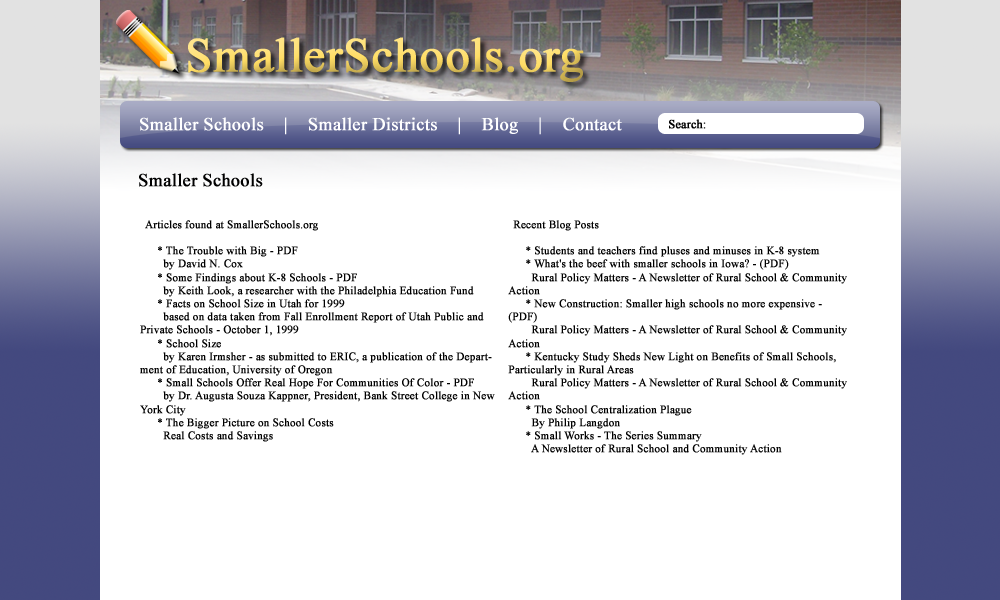
<style>
.page{position:relative;width:1000px;height:600px;background:#ffffff}
.page>*{position:absolute;margin:0}
.t1{font:48px "TimesNewRomanPSMT";font-weight:bold}
.t2{font:18px "TimesNewRomanPSMT";color:#ffffff;font-weight:bold}
.t3{font:12px "TimesNewRomanPSMT";color:#000000;font-weight:bold}
.t4{font:18px "TimesNewRomanPSMT";color:#000000;font-weight:bold}
.t5{font:11px "TimesNewRomanPSMT";color:#000000;font-weight:bold}
</style>
<div class="page">
<p class="t1" style="left:188px;top:37px;width:396px;height:45px">SmallerSchools.org</p>
<p class="t2" style="left:140px;top:117px;width:482px;height:18px">Smaller Schools    |    Smaller Districts    |    Blog    |    Contact</p>
<p class="t3" style="left:669px;top:119px;width:37px;height:10px">Search:</p>
<p class="t4" style="left:139px;top:173px;width:124px;height:14px">Smaller Schools</p>
<p class="t5" style="left:140px;top:220px;width:355px;height:222px">Articles found at SmallerSchools.org<br><br>    * The Trouble with Big - PDF<br>      by David N. Cox<br>    * Some Findings about K-8 Schools - PDF<br>      by Keith Look, a researcher with the Philadelphia Education Fund<br>    * Facts on School Size in Utah for 1999<br>      based on data taken from Fall Enrollment Report of Utah Public and Private Schools - October 1, 1999<br>    * School Size<br>      by Karen Irmsher - as submitted to ERIC, a publication of the Department of Education, University of Oregon<br>    * Small Schools Offer Real Hope For Communities Of Color - PDF<br>      by Dr. Augusta Souza Kappner, President, Bank Street College in New York City<br>    * The Bigger Picture on School Costs<br>      Real Costs and Savings</p>
<p class="t5" style="left:508px;top:220px;width:339px;height:235px">Recent Blog Posts<br> <br>    * Students and teachers find pluses and minuses in K-8 system<br>    * What's the beef with smaller schools in Iowa? - (PDF)<br>      Rural Policy Matters - A Newsletter of Rural School &amp; Community Action<br>    * New Construction: Smaller high schools no more expensive - (PDF)<br>      Rural Policy Matters - A Newsletter of Rural School &amp; Community Action<br>    * Kentucky Study Sheds New Light on Benefits of Small Schools, Particularly in Rural Areas<br>      Rural Policy Matters - A Newsletter of Rural School &amp; Community Action<br>    * The School Centralization Plague<br>      By Philip Langdon<br>    * Small Works - The Series Summary<br>      A Newsletter of Rural School and Community Action<br>    * School Size, School Climate, and Student Performance<br>      by Kathleen Cotton - as submitted to the Northwest Regional Educational Laboratory, School Improvement Series<br>    * Dollars and Sense<br>      The Cost Effectiveness of Small Schools - (large PDF)<br>    * Safer, Saner Schools<br>      External Site - (PDF)<br>    * Revival of the K-8 School<br>      by Priscilla Pardini<br>    * K-8 Schools - Exploring Choices for the Future<br>      Salt Lake City School District K-8 Schools<br>    * The Answer is Smaller Schools<br>      by Stacy Mitchell<br>    * National Clearinghouse for Educational Facilities<br>      References to books and other media</p>
</div>
